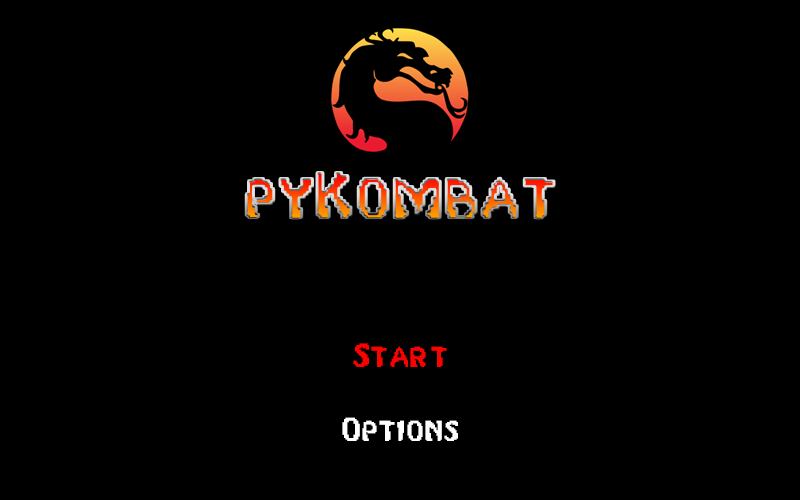
<style>
.page{position:relative;width:800px;height:500px;background:#000000}
.page>*{position:absolute;margin:0}
.t1{font:64px "MortalKombat2"}
.t2{font:32px "MortalKombat2";color:#ff0000}
.t3{font:32px "MortalKombat2";color:#ffffff}
</style>
<div class="page">
<p class="t1" style="left:246px;top:172px;width:308px;height:48px">pyKombat</p>
<p class="t2" style="left:353px;top:343px;width:94px;height:24px">Start</p>
<p class="t3" style="left:342px;top:417px;width:116px;height:24px">Options</p>
</div>
